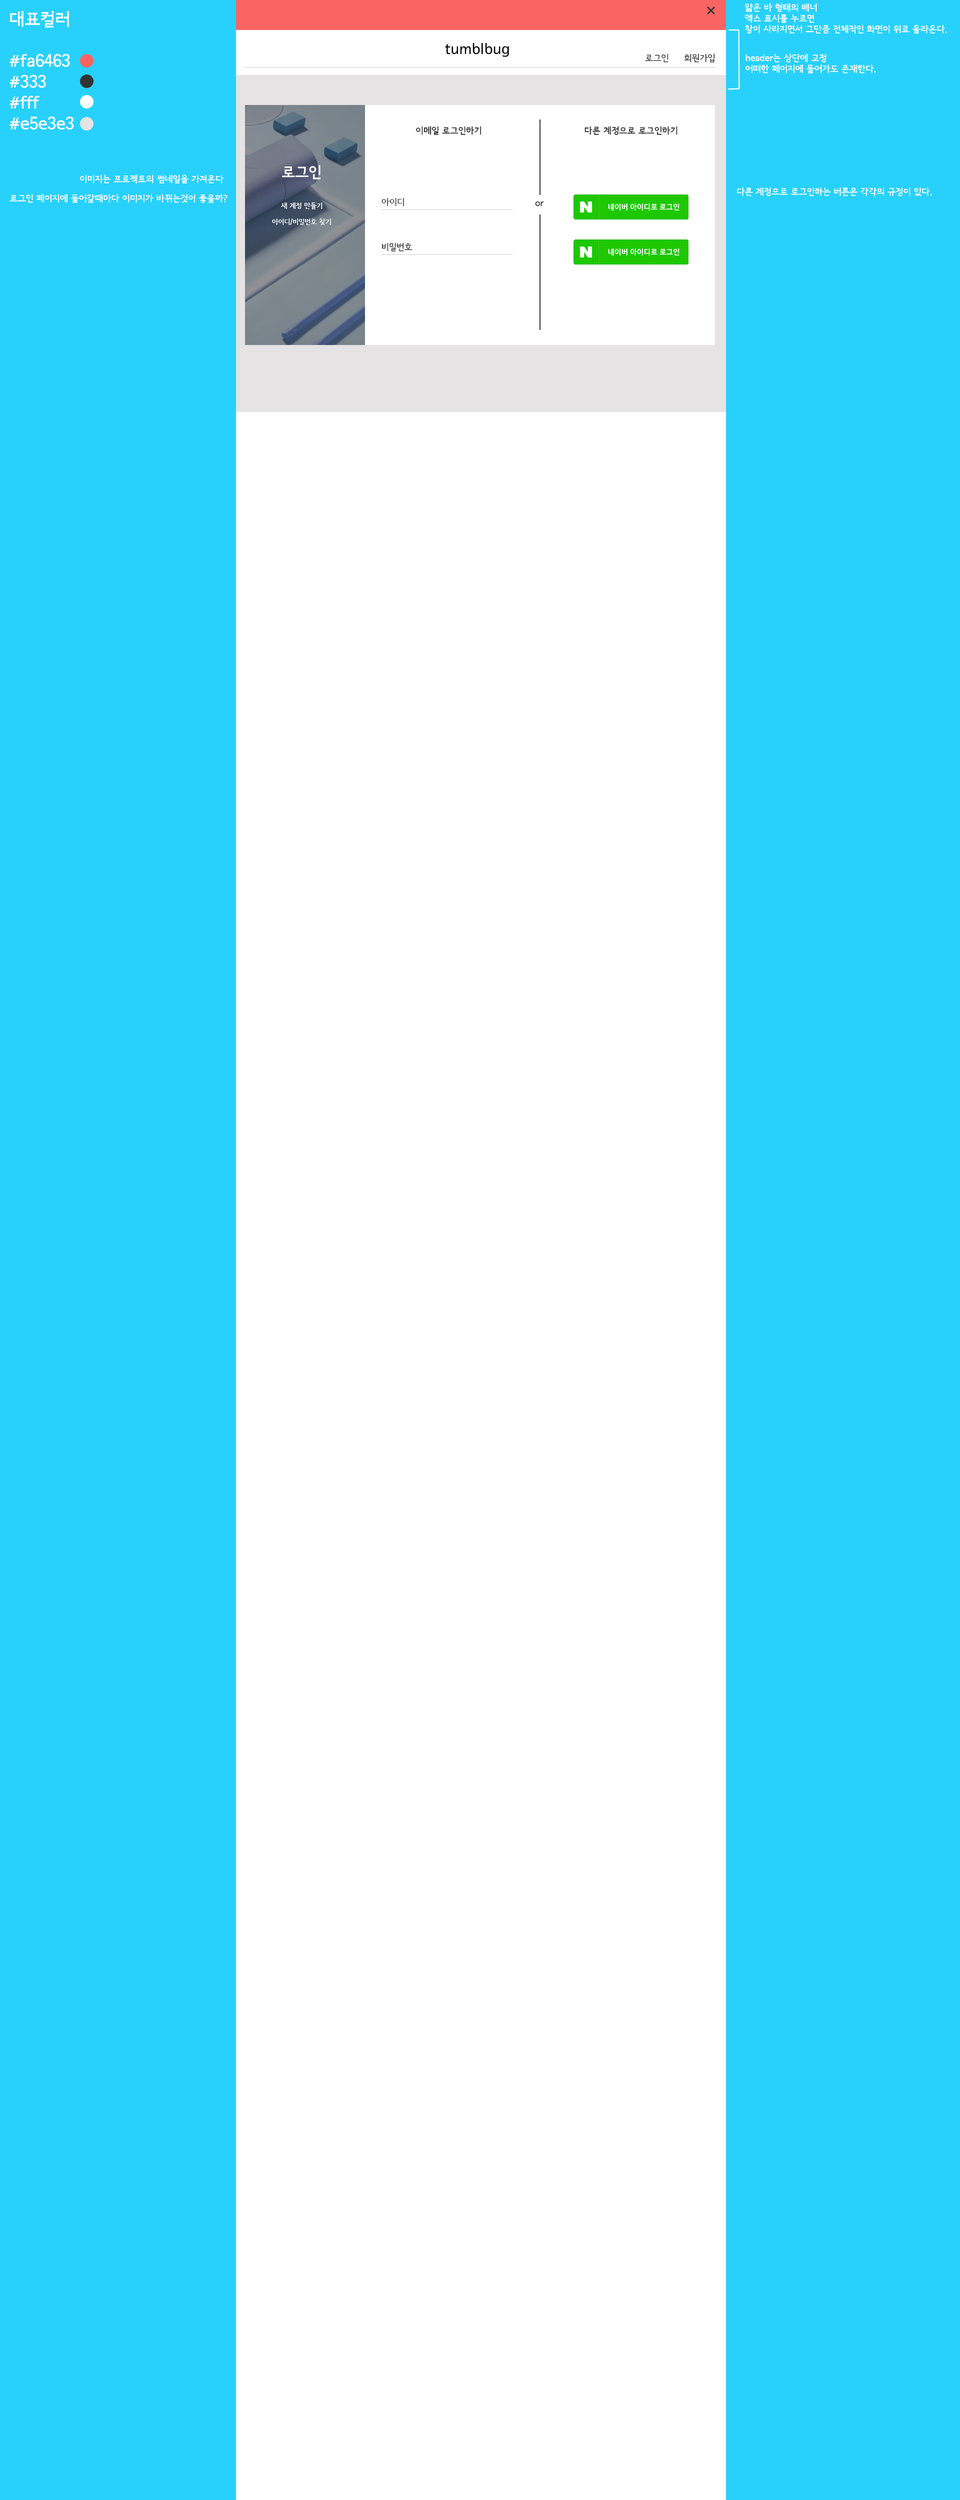
<style>
.page{position:relative;width:960px;height:2500px;background:#27d1fb}
.page>*{position:absolute;margin:0}
.t1{font:9px "SeoulNamsanB";color:#ffffff}
.t2{font:17.4px "SeoulNamsanB";color:#ffffff}
.t3{font:15.3px "SeoulNamsanB";color:#000000}
.t4{font:9px "SeoulNamsanB";color:#333333}
.t5{font:9px "SeoulNamsanEB";color:#333333}
.t6{font:15px "SeoulNamsanEB";color:#ffffff}
.t7{font:7px "SeoulNamsanB";color:#ffffff}
.t8{font:9.1px "SeoulNamsanB";color:#333333}
</style>
<div class="page">
<p class="t1" style="left:745px;top:3px;width:202px;height:31px">얇은 바 형태의 배너<br>엑스 표시를 누르면 <br>창이 사라지면서 그만큼 전체적인 화면이 위로 올라온다.</p>
<p class="t2" style="left:10px;top:11px;width:64px;height:119px">대표컬러<br><br>#fa6463<br>#333<br>#fff<br>#e5e3e3</p>
<p class="t3" style="left:445px;top:43px;width:64px;height:14px">tumblbug</p>
<p class="t4" style="left:645px;top:54px;width:23px;height:8px">로그인</p>
<p class="t4" style="left:684px;top:54px;width:31px;height:8px">회원가입</p>
<p class="t1" style="left:746px;top:54px;width:130px;height:20px">header는 상단에 고정<br>어떠한 페이지에 들어가도 존재한다.</p>
<p class="t5" style="left:416px;top:126px;width:66px;height:9px">이메일 로그인하기</p>
<p class="t5" style="left:584px;top:126px;width:94px;height:10px">다른 계정으로 로그인하기</p>
<p class="t6" style="left:282px;top:165px;width:38px;height:15px">로그인</p>
<p class="t1" style="left:80px;top:174px;width:144px;height:10px">이미지는 프로젝트의 썸네일을 가져온다</p>
<p class="t1" style="left:10px;top:194px;width:218px;height:9px">로그인 페이지에 들어갈때마다 이미지가 바뀌는것이 좋을까?</p>
<p class="t4" style="left:382px;top:198px;width:22px;height:8px">아이디</p>
<p class="t1" style="left:737px;top:188px;width:195px;height:8px">다른 계정으로 로그인하는 버튼은 각각의 규정이 있다.</p>
<p class="t7" style="left:281px;top:202px;width:41px;height:8px">새 계정 만들기</p>
<p class="t5" style="left:535px;top:201px;width:9px;height:5px">or</p>
<p class="t7" style="left:272px;top:218px;width:59px;height:7px">아이디/비밀번호 찾기</p>
<p class="t8" style="left:382px;top:242px;width:30px;height:10px">비밀번호</p>
</div>
